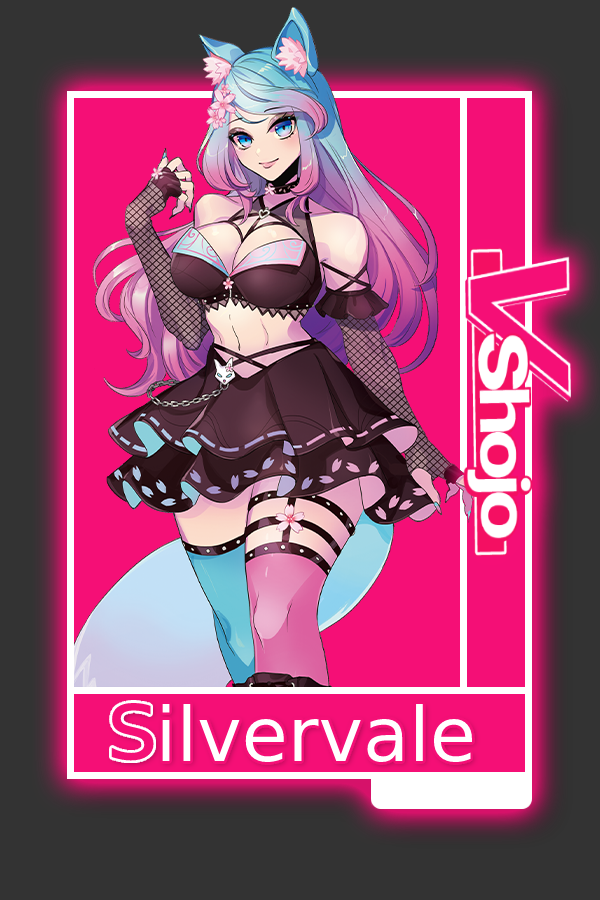
<style>
.page{position:relative;width:600px;height:900px;background:#333333}
.page>*{position:absolute;margin:0}
.t1{font:100px "CoolveticaRg-Regular";color:#f50f76}
.t2{font:75px "CoolveticaRg-Regular";color:#f50f76}
.t3{font:75px "CoolveticaRg-Regular";color:#ffffff}
</style>
<div class="page">
<p class="t1" style="left:111px;top:702px;width:43px;height:59px"><span class="t2">   </span>s</p>
<p class="t3" style="left:162px;top:704px;width:310px;height:59px"><span class="t2">      </span>ilvervale</p>
</div>
